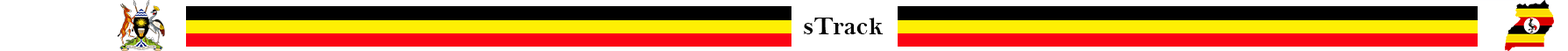
<style>
.page{position:relative;width:1568px;height:51px;background:#ffffff}
.page>*{position:absolute;margin:0}
.t1{font:26.3px "BellMTBold";color:#020202}
</style>
<div class="page">
<p class="t1" style="left:804px;top:18px;width:80px;height:16px">sTrack</p>
</div>
